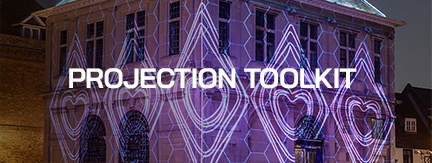
<style>
.page{position:relative;width:432px;height:163px}
.page>*{position:absolute;margin:0}
.t1{font:28px "BaiJamjuree-Bold";letter-spacing:-0.025em;color:#fefefe}
</style>
<div class="page">
<p class="t1" style="left:69px;top:68px;width:288px;height:21px">PROJECTION TOOLKIT</p>
</div>
